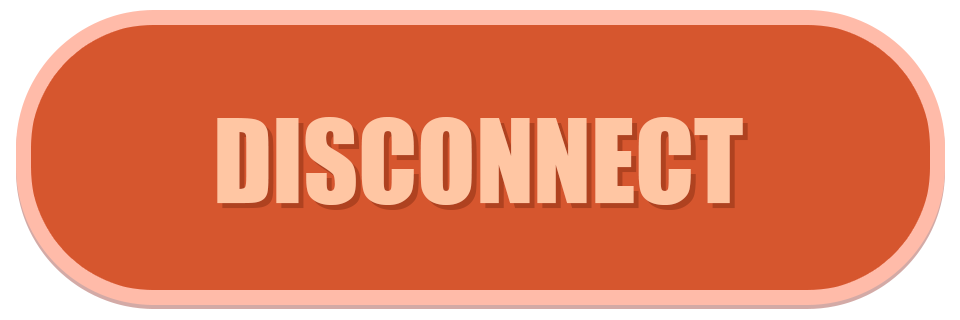
<style>
.page{position:relative;width:960px;height:320px;background:#d6562e}
.page>*{position:absolute;margin:0}
.t1{font:106.7px "Impact";color:#ffc6a3}
</style>
<div class="page">
<p class="t1" style="left:217px;top:117px;width:526px;height:88px">DISCONNECT</p>
</div>
